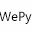
<style>
.page{position:relative;width:32px;height:32px;background:#fefefe}
.page>*{position:absolute;margin:0}
.t1{font:12px "MicrosoftYaHei";color:#030303}
</style>
<div class="page">
<p class="t1" style="left:0px;top:11px;width:32px;height:13px">WePy</p>
</div>
